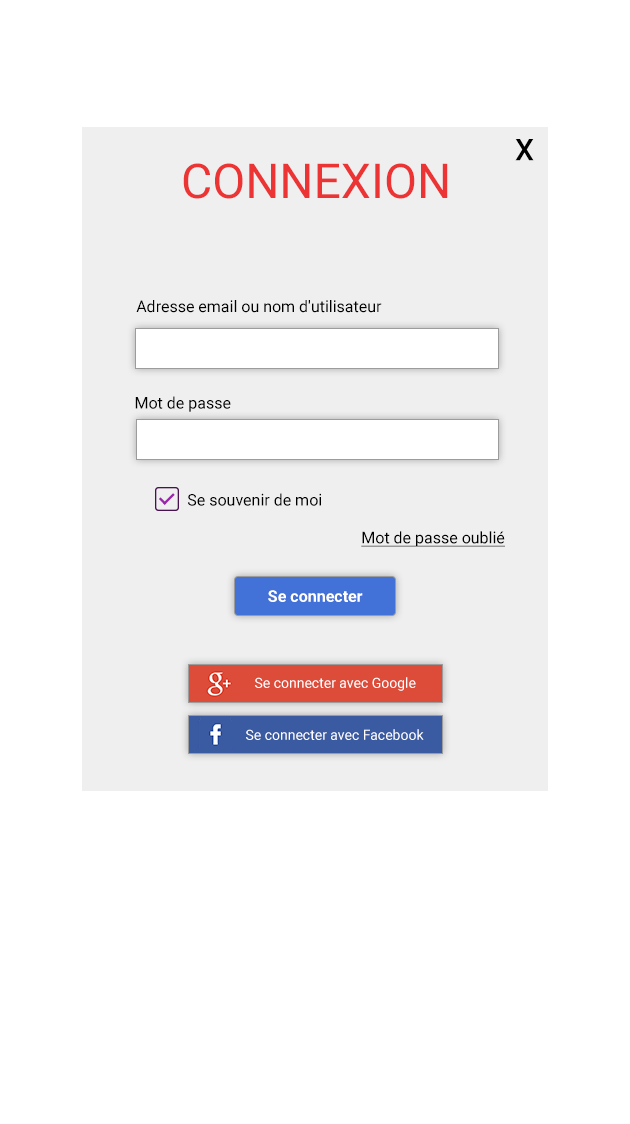
<style>
.page{position:relative;width:630px;height:1124px;background:#ffffff}
.page>*{position:absolute;margin:0}
.t1{font:30px "Roboto-Medium";color:#000000}
.t2{font:48px "Roboto-Regular";color:#ec3434}
.t3{font:16px "Roboto-Regular";color:#000000}
.t4{font:16px "Roboto-Regular";color:#000000;text-decoration:underline}
.t5{font:16px "Roboto-Bold";color:#ffffff}
.t6{font:14px "Roboto-Regular";color:#ffffff}
</style>
<div class="page">
<p class="t1" style="left:515px;top:139px;width:19px;height:22px">X</p>
<p class="t2" style="left:183px;top:163px;width:265px;height:36px">CONNEXION</p>
<p class="t3" style="left:136px;top:300px;width:246px;height:13px">Adresse email ou nom d'utilisateur</p>
<p class="t3" style="left:135px;top:396px;width:96px;height:16px">Mot de passe</p>
<p class="t3" style="left:188px;top:493px;width:133px;height:13px">Se souvenir de moi</p>
<p class="t4" style="left:361px;top:531px;width:144px;height:16px">Mot de passe oublié</p>
<p class="t5" style="left:268px;top:590px;width:95px;height:12px">Se connecter</p>
<p class="t6" style="left:255px;top:677px;width:161px;height:14px">Se connecter avec Google</p>
<p class="t6" style="left:246px;top:729px;width:178px;height:11px">Se connecter avec Facebook</p>
</div>
